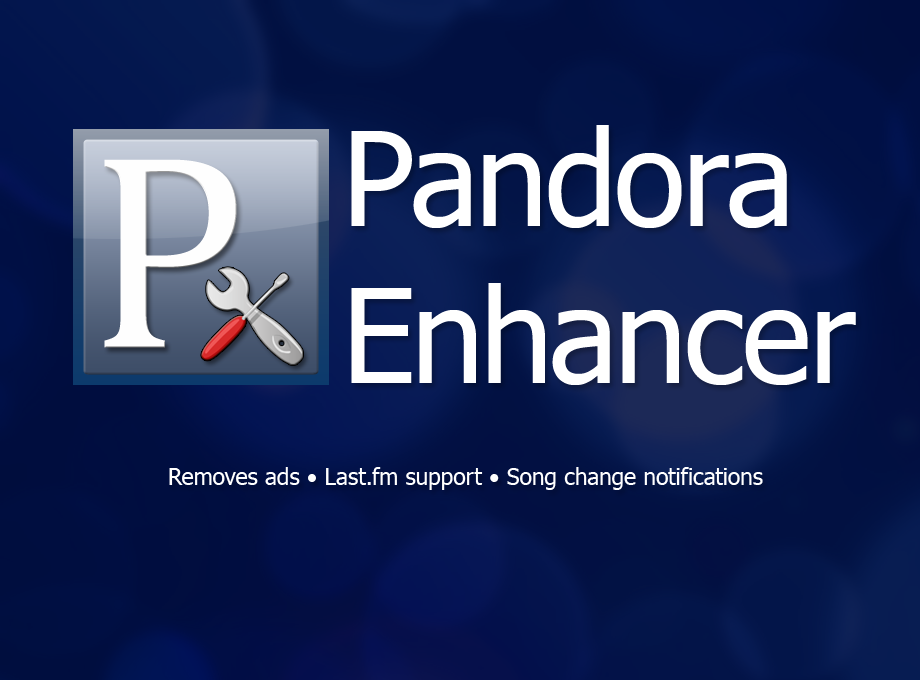
<style>
.page{position:relative;width:920px;height:680px}
.page>*{position:absolute;margin:0}
.t1{font:131px "Tahoma";color:#ffffff}
.t2{font:23px "Tahoma";color:#ffffff}
</style>
<div class="page">
<p class="t1" style="left:351px;top:125px;width:505px;height:260px">Pandora<br>Enhancer</p>
<p class="t2" style="left:169px;top:467px;width:594px;height:23px">Removes ads • Last.fm support • Song change notifications</p>
</div>
